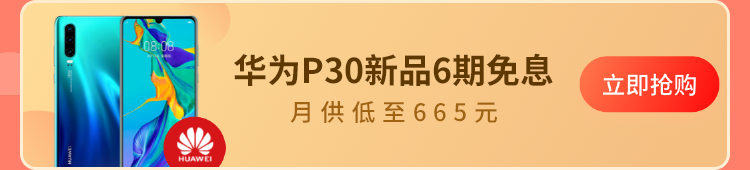
<style>
.page{position:relative;width:750px;height:170px}
.page>*{position:absolute;margin:0}
.t1{font:34px "SourceHanSansCN-Bold";color:#5f3800}
.t2{font:24px "SourceHanSansCN-Medium";letter-spacing:0.28em;color:#a06311}
</style>
<div class="page">
<p class="t1" style="left:234px;top:53px;width:319px;height:34px">华为P30新品6期免息</p>
<p class="t2" style="left:290px;top:101px;width:207px;height:22px">月供低至665元</p>
</div>
